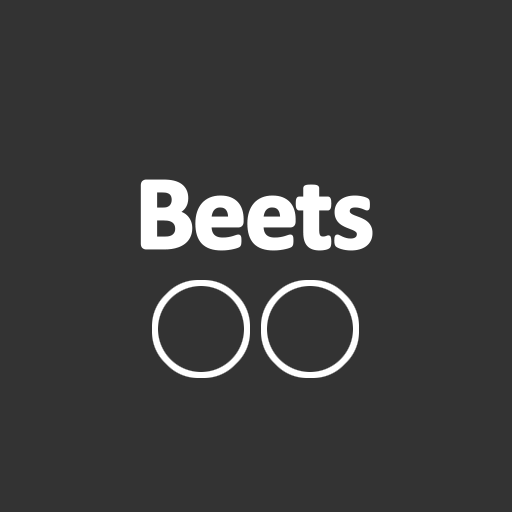
<style>
.page{position:relative;width:512px;height:512px;background:#333333}
.page>*{position:absolute;margin:0}
.t1{font:106px "Calibri-Bold";letter-spacing:-0.04em;color:#ffffff;font-weight:bold}
</style>
<div class="page">
<p class="t1" style="left:140px;top:179px;width:233px;height:72px">Beets</p>
</div>
